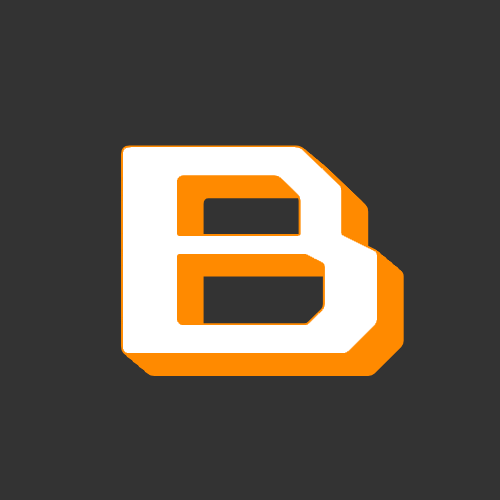
<style>
.page{position:relative;width:500px;height:500px;background:#333333}
.page>*{position:absolute;margin:0}
.t1{font:303.2px "RexliaRg-Regular";color:#ffffff}
</style>
<div class="page">
<p class="t1" style="left:120px;top:145px;width:259px;height:210px">B</p>
</div>
